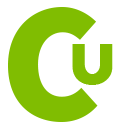
<style>
.page{position:relative;width:128px;height:128px;background:#ffffff}
.page>*{position:absolute;margin:0}
.t1{font:170.7px "SourceSansPro-Black";color:#80bd01}
.t2{font:96px "TwCenMT-Bold";color:#80bd01}
</style>
<div class="page">
<p class="t1" style="left:8px;top:7px;width:90px;height:115px">C</p>
<p class="t2" style="left:72px;top:44px;width:41px;height:41px">u</p>
</div>
